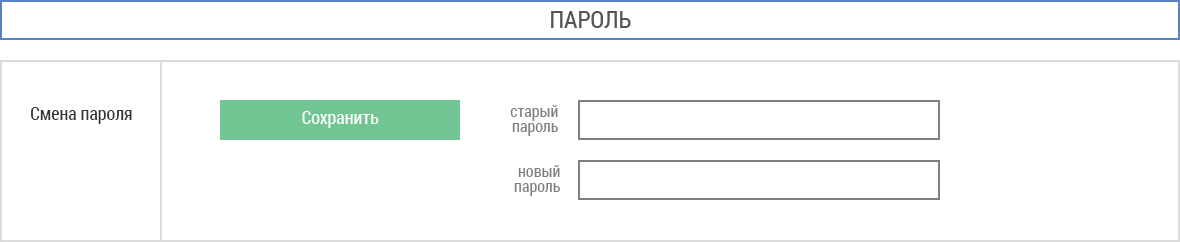
<style>
.page{position:relative;width:1180px;height:242px;background:#ffffff}
.page>*{position:absolute;margin:0}
.t1{font:18px "RobotoCondensed-Regular";color:#333333}
.t2{font:18px "RobotoCondensed-Regular";color:#ffffff}
.t3{font:16px/15px "RobotoCondensed-Regular";color:#7f7f7f}
</style>
<div class="page">
<p class="t1" style="left:31px;top:107px;width:101px;height:17px">Смена пароля</p>
<p class="t2" style="left:302px;top:111px;width:77px;height:17px">Сохранить</p>
<p class="t3" style="left:510px;top:105px;width:48px;height:31px;text-align:right">старый<br>пароль</p>
<p class="t3" style="left:514px;top:165px;width:46px;height:31px;text-align:right">новый<br>пароль</p>
</div>
